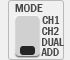
<style>
.page{position:relative;width:70px;height:60px;background:#f0f0f0}
.page>*{position:absolute;margin:0}
.t1{font:12px "FranklinGothic-MediumCond";color:#494949}
.t2{font:11px "FranklinGothic-MediumCond";color:#494949}
</style>
<div class="page">
<p class="t1" style="left:15px;top:4px;width:28px;height:8px">MODE</p>
<p class="t2" style="left:42px;top:16px;width:18px;height:8px">CH1</p>
<p class="t2" style="left:42px;top:27px;width:17px;height:8px">CH2</p>
<p class="t2" style="left:42px;top:38px;width:22px;height:8px">DUAL</p>
<p class="t2" style="left:41px;top:48px;width:18px;height:8px">ADD</p>
</div>
